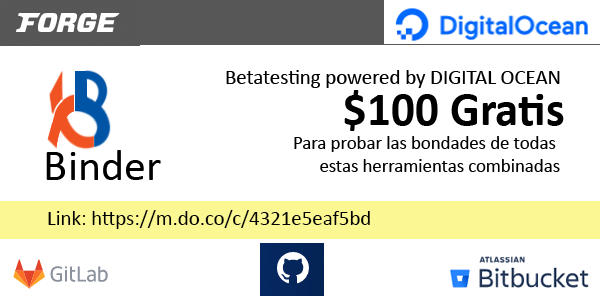
<style>
.page{position:relative;width:600px;height:300px;background:#ffffff}
.page>*{position:absolute;margin:0}
.t1{font:20.8px "Calibri";color:#000000}
.t2{font:47.1px "Calibri-Bold";color:#000000}
.t3{font:18.8px "Calibri";color:#000000}
.t4{font:44.4px "Calibri";color:#000000}
</style>
<div class="page">
<p class="t1" style="left:226px;top:70px;width:334px;height:18px">Betatesting powered by DIGITAL OCEAN</p>
<p class="t2" style="left:344px;top:90px;width:220px;height:41px">$100 Gratis</p>
<p class="t3" style="left:294px;top:136px;width:266px;height:36px;text-align:right">Para probar las bondades de todas <br>estas herramientas combinadas</p>
<p class="t4" style="left:46px;top:150px;width:115px;height:30px">Binder</p>
<p class="t1" style="left:48px;top:210px;width:322px;height:19px">Link: https://m.do.co/c/4321e5eaf5bd</p>
</div>
